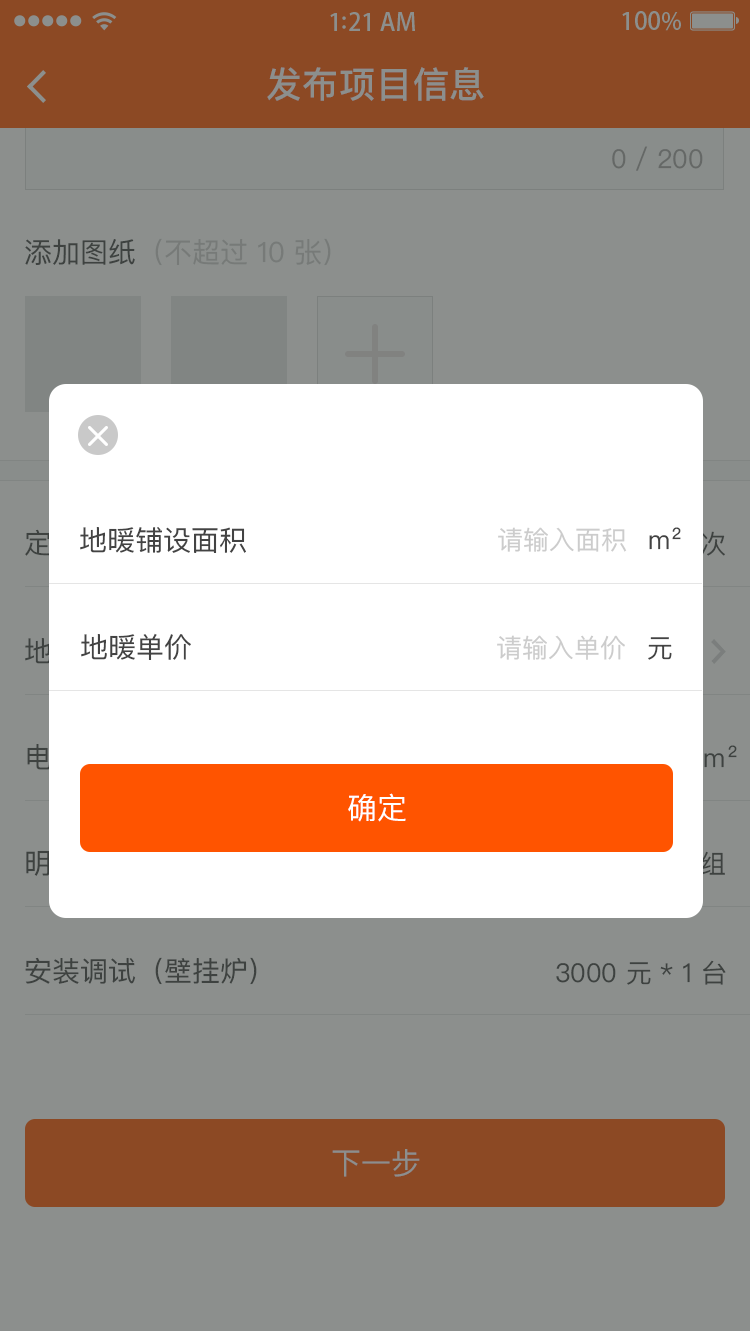
<style>
.page{position:relative;width:750px;height:1331px;background:#8c8f8d}
.page>*{position:absolute;margin:0}
.t1{font:36px "PingFangSC-Medium";letter-spacing:0.02em;color:#8c8f8d}
.t2{font:26px "PingFangSC-Regular";color:#656866}
.t3{font:28px "PingFangSC-Regular"}
.t4{font:28px "PingFangSC-Regular";color:#434343}
.t5{font:26px "PingFangSC-Regular";color:#cccccc}
.t6{font:26px "PingFangSC-Regular";color:#434343}
.t7{font:30px "PingFangSC-Regular";color:#ffffff;text-transform:uppercase}
.t8{font:30px "PingFangSC-Regular";color:#8c8f8d;text-transform:uppercase}
</style>
<div class="page">
<p class="t1" style="left:267px;top:67px;width:217px;height:34px">发布项目信息</p>
<p class="t2" style="left:612px;top:146px;width:91px;height:25px">0 / 200</p>
<p class="t3" style="left:25px;top:238px;width:306px;height:28px">添加图纸（不超过 10 张）</p>
<p class="t4" style="left:80px;top:527px;width:166px;height:26px">地暖铺设面积</p>
<p class="t5" style="left:498px;top:527px;width:129px;height:25px">请输入面积</p>
<p class="t6" style="left:649px;top:527px;width:32px;height:23px">m²</p>
<p class="t6" style="left:680px;top:531px;width:45px;height:25px">/ 次</p>
<p class="t4" style="left:81px;top:633px;width:110px;height:27px">地暖单价</p>
<p class="t5" style="left:497px;top:635px;width:128px;height:25px">请输入单价</p>
<p class="t6" style="left:648px;top:637px;width:24px;height:23px">元</p>
<p class="t7" style="left:348px;top:793px;width:58px;height:29px">确定</p>
<p class="t4" style="left:25px;top:957px;width:232px;height:28px">安装调试（壁挂炉）</p>
<p class="t6" style="left:556px;top:960px;width:170px;height:25px">3000 元 * 1 台</p>
<p class="t8" style="left:332px;top:1149px;width:88px;height:28px">下一步</p>
</div>
